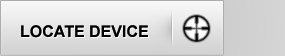
<style>
.page{position:relative;width:285px;height:56px}
.page>*{position:absolute;margin:0}
.t1{font:16px "Arial-BoldMT";color:#000000}
.t2{font:16px "Arial-BoldMT"}
</style>
<div class="page">
<p class="t1" style="left:21px;top:25px;width:127px;height:13px">LOCATE DEVICE</p>
<p class="t1" style="left:21px;top:25px;width:127px;height:13px">LOCATE DEVICE</p>
<p class="t2" style="left:22px;top:26px;width:127px;height:13px">LOCATE DEVICE</p>
</div>
